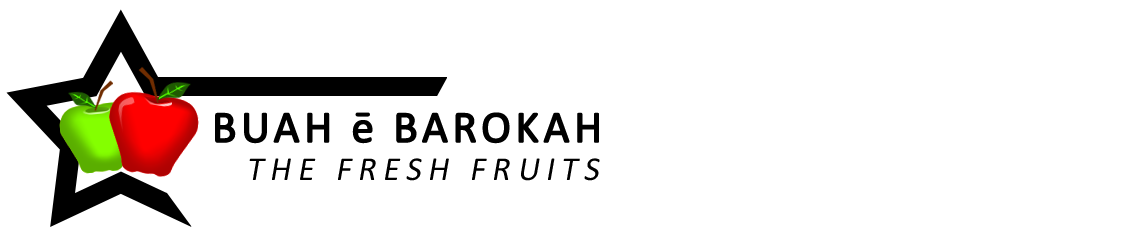
<style>
.page{position:relative;width:1129px;height:234px;background:#ffffff}
.page>*{position:absolute;margin:0}
.t1{font:45px "Calibri";letter-spacing:0.075em;color:#000000;font-weight:bold}
.t2{font:33.8px "Calibri";letter-spacing:0.2em;color:#000000;font-style:italic}
</style>
<div class="page">
<p class="t1" style="left:215px;top:112px;width:384px;height:32px">BUAH e BAROKAH</p>
<p class="t2" style="left:249px;top:158px;width:351px;height:23px">THE FRESH FRUITS</p>
</div>
